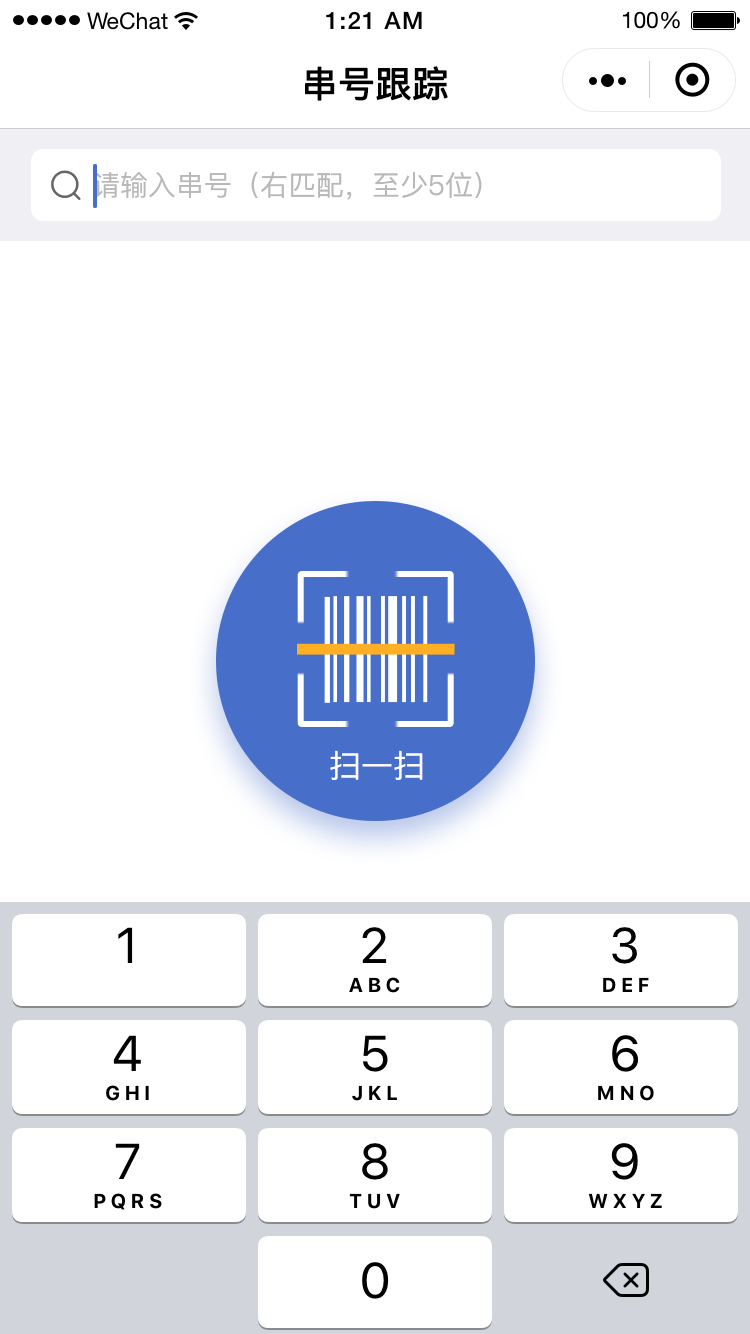
<style>
.page{position:relative;width:750px;height:1334px;background:#ffffff}
.page>*{position:absolute;margin:0}
.t1{font:36px "PingFang-SC-Medium";color:#000000;font-weight:bold}
.t2{font:28px "PingFang-SC-Medium";color:#b8b8b8}
.t3{font:32px "PingFang-SC-Medium";color:#ffffff}
</style>
<div class="page">
<p class="t1" style="left:305px;top:66px;width:143px;height:35px">串号跟踪</p>
<p class="t2" style="left:93px;top:171px;width:389px;height:29px">请输入串号（右匹配，至少5位）</p>
<p class="t3" style="left:330px;top:750px;width:93px;height:30px">扫一扫</p>
</div>
